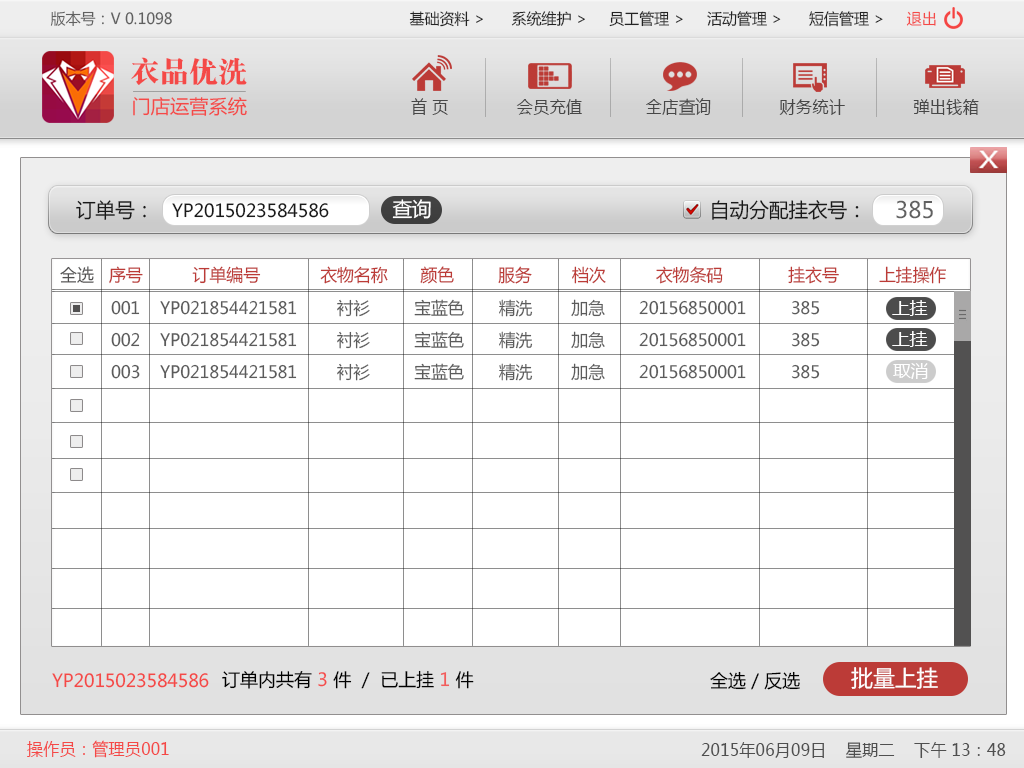
<style>
.page{position:relative;width:1024px;height:768px;background:#ffffff}
.page>*{position:absolute;margin:0}
.t1{font:15.3px "MicrosoftYaHei";color:#606060}
.t2{font:15.3px "MicrosoftYaHei";color:#242424}
.t3{font:15.3px "MicrosoftYaHei";color:#f44947}
.t4{font:29.6px "DFSong-XB-80-Win-GB";color:#f44947}
.t5{font:19.1px "MicrosoftYaHei";color:#f44947}
.t6{font:17px "MicrosoftYaHei";color:#474747;scale:0.97 1}
.t7{font:20px "MicrosoftYaHei";color:#191919}
.t8{font:18px "MicrosoftYaHei";color:#191919}
.t9{font:20px "MicrosoftYaHei";color:#ffffff}
.t10{font:22.5px "MicrosoftYaHei";color:#616161}
.t11{font:17.2px "MicrosoftYaHei";color:#bc3b37}
.t12{font:17.2px "MicrosoftYaHei";color:#525151}
.t13{font:17px "MicrosoftYaHei";color:#5b5b5b}
.t14{font:17.1px "MicrosoftYaHei";color:#ffffff}
.t15{font:18px "MicrosoftYaHei";color:#f44947}
.t16{font:18px "MicrosoftYaHei";color:#000000}
.t17{font:18px "MicrosoftYaHei";color:#f44c4b}
.t18{font:18px "MicrosoftYaHei";color:#f25c5b}
.t19{font:22.4px "MicrosoftYaHei";color:#ffffff}
.t20{font:17.1px "MicrosoftYaHei";color:#f44947;scale:0.96 1}
.t21{font:17.1px "MicrosoftYaHei";color:#4f4f4f;scale:0.96 1}
</style>
<div class="page">
<p class="t1" style="left:50px;top:11px;width:122px;height:15px">版本号：V 0.1098</p>
<p class="t2" style="left:409px;top:11px;width:527px;height:16px">基础资料 &gt;      系统维护 &gt;     员工管理 &gt;     活动管理 &gt;      短信管理 &gt;     <span class="t3">退出</span></p>
<p class="t4" style="left:131px;top:57px;width:116px;height:28px">衣品优洗</p>
<p class="t5" style="left:133px;top:97px;width:114px;height:19px">门店运营系统</p>
<p class="t6" style="left:411px;top:98px;width:568px;height:17px">首 页              会员充值             全店查询              财务统计              弹出钱箱</p>
<p class="t7" style="left:76px;top:200px;width:70px;height:20px">订单号：</p>
<p class="t8" style="left:172px;top:203px;width:157px;height:15px">YP2015023584586</p>
<p class="t9" style="left:392px;top:199px;width:39px;height:20px">查询</p>
<p class="t7" style="left:712px;top:200px;width:147px;height:20px">自动分配挂衣号：</p>
<p class="t10" style="left:896px;top:200px;width:37px;height:19px">385</p>
<p class="t11" style="left:60px;top:266px;width:886px;height:18px"><span class="t12">全选</span>   序号          订单编号            衣物名称       颜色         服务        档次          衣物条码             挂衣号        上挂操作</p>
<p class="t13" style="left:111px;top:299px;width:709px;height:18px">001    YP021854421581        衬衫         宝蓝色       精洗        加急       20156850001         385</p>
<p class="t14" style="left:892px;top:300px;width:36px;height:16px">上挂</p>
<p class="t13" style="left:111px;top:331px;width:709px;height:18px">002    YP021854421581        衬衫         宝蓝色       精洗        加急       20156850001         385</p>
<p class="t14" style="left:892px;top:331px;width:36px;height:16px">上挂</p>
<p class="t13" style="left:111px;top:363px;width:709px;height:18px">003    YP021854421581        衬衫         宝蓝色       精洗        加急       20156850001         385</p>
<p class="t14" style="left:893px;top:363px;width:35px;height:16px">取消</p>
<p class="t15" style="left:52px;top:673px;width:157px;height:15px">YP2015023584586</p>
<p class="t16" style="left:222px;top:670px;width:252px;height:19px">订单内共有 <span class="t17">3</span> 件  /  已上挂 <span class="t18">1</span> 件</p>
<p class="t16" style="left:710px;top:671px;width:90px;height:19px">全选 / 反选</p>
<p class="t19" style="left:851px;top:667px;width:87px;height:22px">批量上挂</p>
<p class="t20" style="left:27px;top:740px;width:142px;height:18px">操作员：管理员001</p>
<p class="t21" style="left:701px;top:742px;width:305px;height:16px">2015年06月09日    星期二    下午 13：48</p>
</div>
